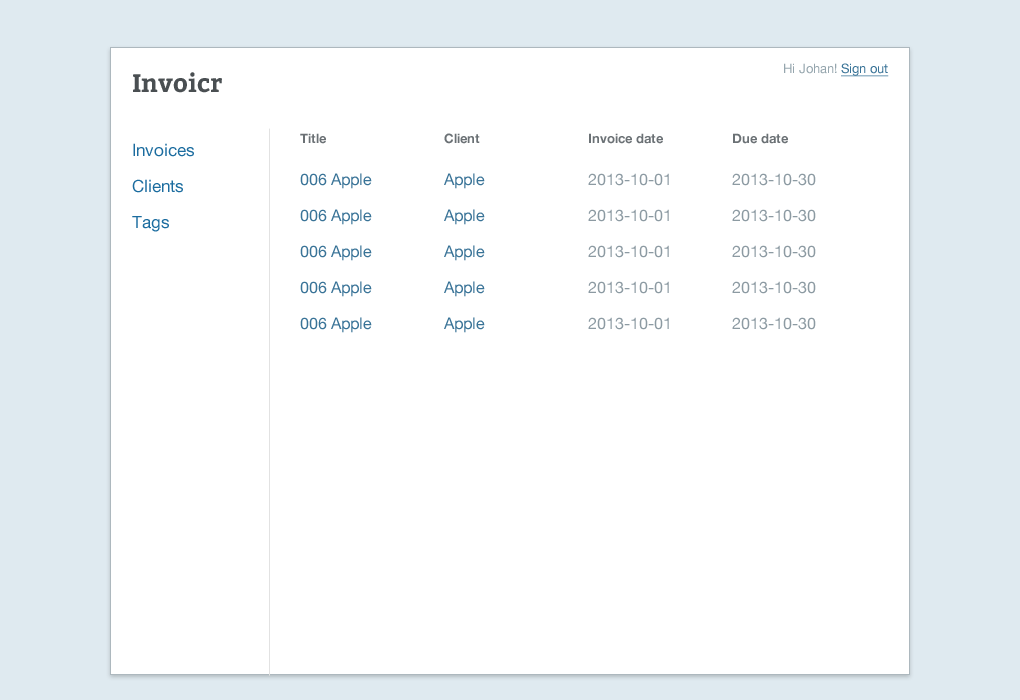
<style>
.page{position:relative;width:1020px;height:700px;background:#ffffff}
.page>*{position:absolute;margin:0}
.t1{font:13px "HelveticaNeue";color:#96a6ae}
.t2{font:13px "HelveticaNeue";color:#397397;text-decoration:underline}
.t3{font:25px "Bitter-Bold";color:#4a4f52}
.t4{font:13px "HelveticaNeue-Bold";color:#6c7276}
.t5{font:17px/36px "HelveticaNeue";color:#1b6c9f}
.t6{font:16px/36px "HelveticaNeue";color:#8c9aa2}
.t7{font:16px/36px "HelveticaNeue";color:#397397}
</style>
<div class="page">
<p class="t1" style="left:784px;top:63px;width:105px;height:14px">Hi Johan! <span class="t2">Sign out</span></p>
<p class="t3" style="left:133px;top:72px;width:89px;height:21px">Invoicr</p>
<p class="t4" style="left:300px;top:133px;width:488px;height:11px">Title    Client   Invoice date  Due date</p>
<p class="t5" style="left:132px;top:143px;width:62px;height:89px">Invoices<br>Clients<br>Tags</p>
<p class="t6" style="left:300px;top:173px;width:516px;height:160px"><span class="t7">006 Apple  Apple</span>   2013-10-01  2013-10-30<br><span class="t7">006 Apple  Apple</span>   2013-10-01  2013-10-30<br><span class="t7">006 Apple  Apple</span>   2013-10-01  2013-10-30<br><span class="t7">006 Apple  Apple</span>   2013-10-01  2013-10-30<br><span class="t7">006 Apple  Apple</span>   2013-10-01  2013-10-30</p>
</div>
